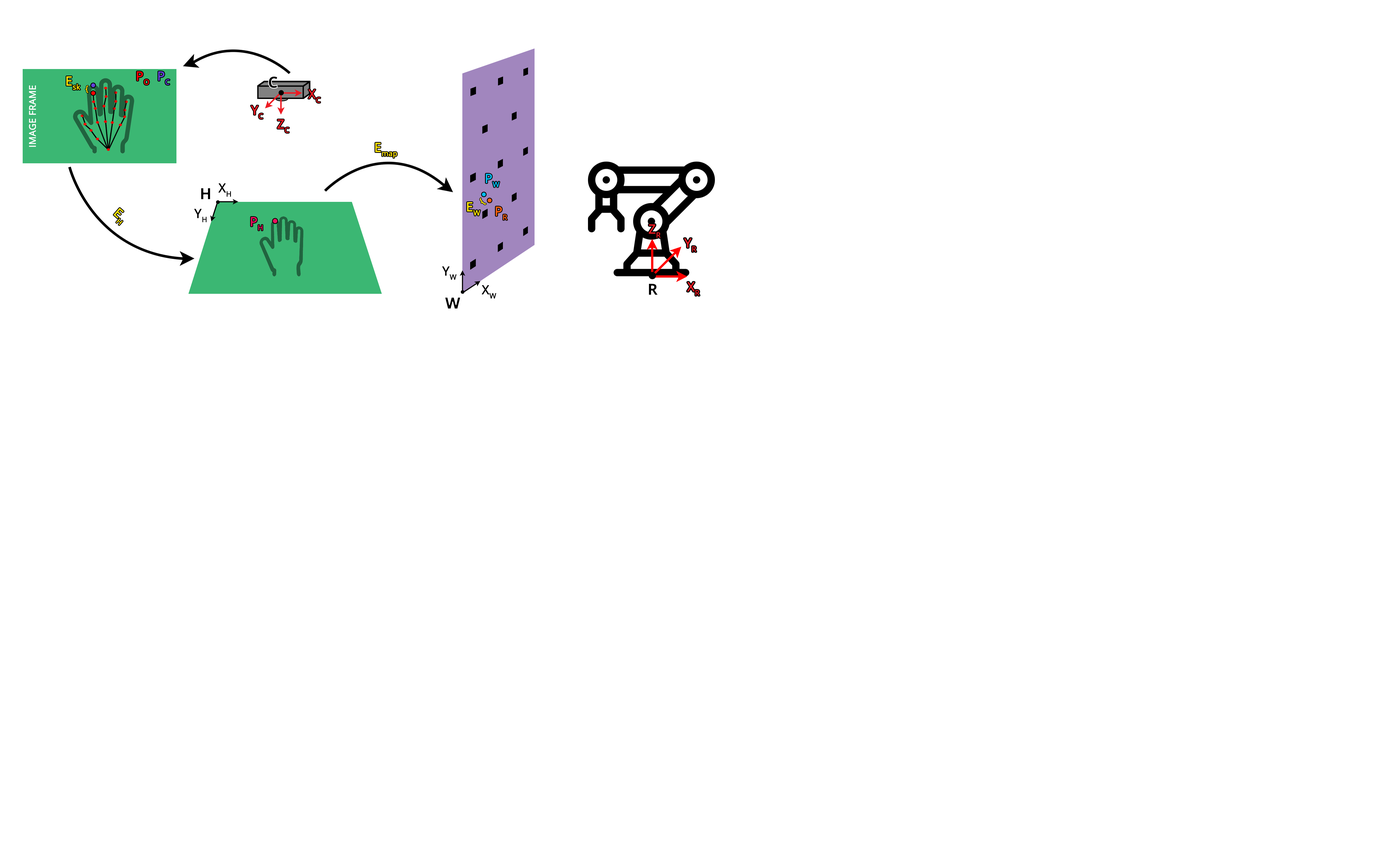
<style>
.page{position:relative;width:1398px;height:853px;background:#ffffff}
.page>*{position:absolute;margin:0}
.t1{font:12.5px "OpenSans";color:#ffe401;font-weight:bold}
.t2{font:12.5px "OpenSans";color:#ff0000;font-weight:bold}
.t3{font:12.5px "OpenSans";color:#6241dc;font-weight:bold}
.t4{font:15.6px "OpenSans-Bold";color:#000000;font-weight:bold}
.t5{font:15.6px "OpenSans";color:#ffffff;font-weight:bold}
.t6{font:13.8px "OpenSans";color:#ffe401;font-weight:bold}
.t7{font:12.5px "OpenSans";color:#ed1c24;font-weight:bold}
.t8{font:12.5px "OpenSans";color:#00bff3;font-weight:bold}
.t9{font:12.5px "OpenSans";color:#000000;font-weight:bold}
.t10{font:15.6px "OpenSans";color:#ffe401;font-weight:bold}
.t11{font:12.5px "OpenSans";color:#fe630f;font-weight:bold}
.t12{font:12.5px "OpenSans";color:#ea115e;font-weight:bold}
</style>
<div class="page">
<p class="t1" style="left:66px;top:76px;width:14px;height:14px">Esk</p>
<p class="t2" style="left:137px;top:71px;width:12px;height:14px">PO</p>
<p class="t3" style="left:158px;top:71px;width:12px;height:14px">PC</p>
<p class="t4" style="left:268px;top:76px;width:9px;height:12px">C</p>
<p class="t5" style="left:29px;top:85px;width:7px;height:62px;rotate:-90deg">IMAGE FRAME</p>
<p class="t6" style="left:85px;top:85px;width:3px;height:8px;rotate:-1deg">{</p>
<p class="t7" style="left:308px;top:89px;width:12px;height:14px">XC</p>
<p class="t7" style="left:251px;top:106px;width:12px;height:13px">YC</p>
<p class="t7" style="left:277px;top:119px;width:12px;height:14px">ZC</p>
<p class="t1" style="left:375px;top:143px;width:22px;height:15px">Emap</p>
<p class="t8" style="left:486px;top:174px;width:13px;height:13px">PW</p>
<p class="t9" style="left:218px;top:183px;width:13px;height:14px">XH</p>
<p class="t4" style="left:201px;top:188px;width:10px;height:12px">H</p>
<p class="t1" style="left:114px;top:208px;width:10px;height:17px;rotate:41deg">EH</p>
<p class="t9" style="left:194px;top:209px;width:13px;height:13px">YH</p>
<p class="t1" style="left:467px;top:202px;width:13px;height:14px">EW</p>
<p class="t10" style="left:480px;top:198px;width:6px;height:7px;rotate:-43deg">{</p>
<p class="t11" style="left:496px;top:207px;width:11px;height:13px">PR</p>
<p class="t12" style="left:251px;top:217px;width:12px;height:14px">PH</p>
<p class="t7" style="left:648px;top:224px;width:12px;height:14px">ZR</p>
<p class="t7" style="left:684px;top:238px;width:12px;height:14px">YR</p>
<p class="t9" style="left:442px;top:266px;width:14px;height:14px">YW</p>
<p class="t9" style="left:481px;top:285px;width:15px;height:14px">XW</p>
<p class="t4" style="left:648px;top:283px;width:10px;height:12px">R</p>
<p class="t7" style="left:687px;top:282px;width:12px;height:14px">XR</p>
<p class="t4" style="left:445px;top:297px;width:15px;height:12px">W</p>
</div>
